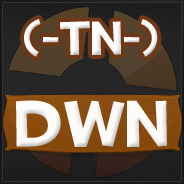
<style>
.page{position:relative;width:184px;height:184px}
.page>*{position:absolute;margin:0}
.t1{font:48px "TF2Build";color:#fefefe}
.t2{font:66px "TF2Build";color:#fdfcfb}
</style>
<div class="page">
<p class="t1" style="left:24px;top:19px;width:134px;height:38px">(-TN-)</p>
<p class="t2" style="left:16px;top:100px;width:151px;height:47px">dwn</p>
</div>
